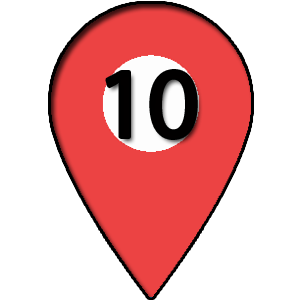
<style>
.page{position:relative;width:300px;height:300px;background:#ffffff}
.page>*{position:absolute;margin:0}
.t1{font:100px "MyriadPro-Regular";color:#020000}
</style>
<div class="page">
<p class="t1" style="left:107px;top:71px;width:89px;height:67px">10</p>
</div>
